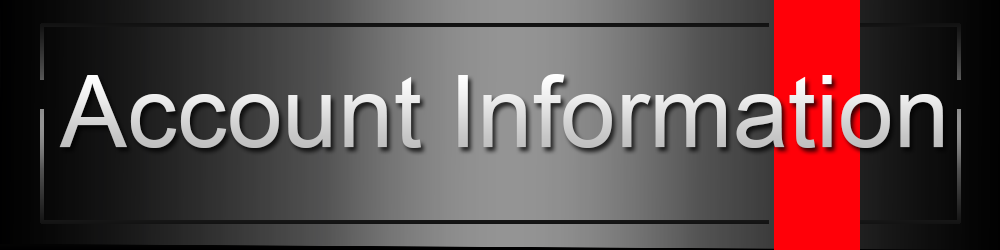
<style>
.page{position:relative;width:1000px;height:250px}
.page>*{position:absolute;margin:0}
.t1{font:100px "ArialMT";color:#d9d9d9}
</style>
<div class="page">
<p class="t1" style="left:59px;top:74px;width:884px;height:74px">Account Information</p>
</div>
